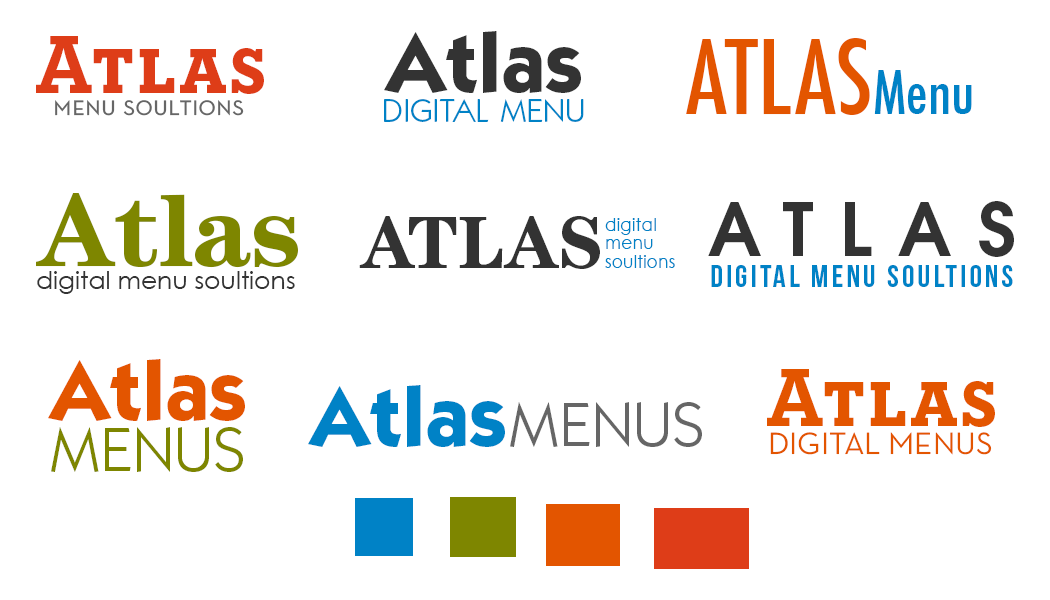
<style>
.page{position:relative;width:1050px;height:600px;background:#ffffff}
.page>*{position:absolute;margin:0}
.t1{font:84.1px "NeutrafaceSlabText-Bold";color:#de3d18;font-variant:small-caps}
.t2{font:85.4px "ItcKabel-Bold";color:#333333}
.t3{font:100px "Futura-CondensedMedium";color:#e35500;font-variant:small-caps}
.t4{font:58.3px "Futura-CondensedMedium";color:#0082c6}
.t5{font:28.9px "NeutrafaceText-Book";color:#666666;font-variant:small-caps}
.t6{font:47.5px "ItcKabel-Book";color:#0082c6;font-variant:small-caps}
.t7{font:104.2px "Century-Bold";color:#7e8600}
.t8{font:72.3px "AvantGarde-Demi";letter-spacing:0.36em;color:#333333}
.t9{font:73.4px "Century-Bold";color:#333333}
.t10{font:17.6px/18.4px "CenturyGothic";color:#0082c6}
.t11{font:31.5px "BebasNeue";letter-spacing:0.1em;color:#0082c6}
.t12{font:25px "CenturyGothic";color:#333333}
.t13{font:85.4px "ItcKabel-Bold";color:#e35500}
.t14{font:84.1px "NeutrafaceSlabText-Bold";color:#e35500;font-variant:small-caps}
.t15{font:85.4px "ItcKabel-Bold";color:#0082c6}
.t16{font:63.4px "ItcKabel-Book";color:#666666;font-variant:small-caps}
.t17{font:63.4px "ItcKabel-Book";color:#7e8600;font-variant:small-caps}
.t18{font:31.4px "NeutrafaceText-Book";color:#e35500;font-variant:small-caps}
</style>
<div class="page">
<p class="t1" style="left:36px;top:36px;width:228px;height:58px">Atlas</p>
<p class="t2" style="left:384px;top:31px;width:197px;height:62px">Atlas</p>
<p class="t3" style="left:686px;top:38px;width:184px;height:77px">ATLAS</p>
<p class="t4" style="left:874px;top:70px;width:98px;height:44px">Menu</p>
<p class="t5" style="left:55px;top:100px;width:189px;height:16px">menu soultions</p>
<p class="t6" style="left:384px;top:99px;width:200px;height:23px">digital menu</p>
<p class="t7" style="left:36px;top:193px;width:262px;height:75px">Atlas</p>
<p class="t8" style="left:708px;top:201px;width:306px;height:56px">ATLAS</p>
<p class="t9" style="left:359px;top:216px;width:241px;height:53px">ATLAS</p>
<p class="t10" style="left:605px;top:218px;width:70px;height:50px">digital<br>menu<br>soultions</p>
<p class="t11" style="left:711px;top:265px;width:302px;height:22px">digital MENU SOULTIONS</p>
<p class="t12" style="left:37px;top:271px;width:258px;height:23px">digital menu soultions</p>
<p class="t13" style="left:48px;top:359px;width:197px;height:62px">Atlas</p>
<p class="t14" style="left:767px;top:369px;width:228px;height:58px">Atlas</p>
<p class="t15" style="left:308px;top:385px;width:197px;height:62px">Atlas</p>
<p class="t16" style="left:510px;top:402px;width:192px;height:45px">MENUS</p>
<p class="t17" style="left:51px;top:427px;width:192px;height:45px">MENUS</p>
<p class="t18" style="left:770px;top:432px;width:222px;height:23px">DIGITAL MENUS</p>
</div>
